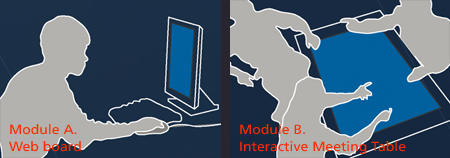
<style>
.page{position:relative;width:450px;height:158px;background:#b3b2ae}
.page>*{position:absolute;margin:0}
.t1{font:13.3px "Frutiger55Roman";color:#ff2a00;scale:1.05 1}
</style>
<div class="page">
<p class="t1" style="left:9px;top:124px;width:72px;height:28px">Module A.  <br>Web board</p>
<p class="t1" style="left:240px;top:124px;width:166px;height:30px">Module B.  <br>Interactive Meeting Table</p>
</div>
